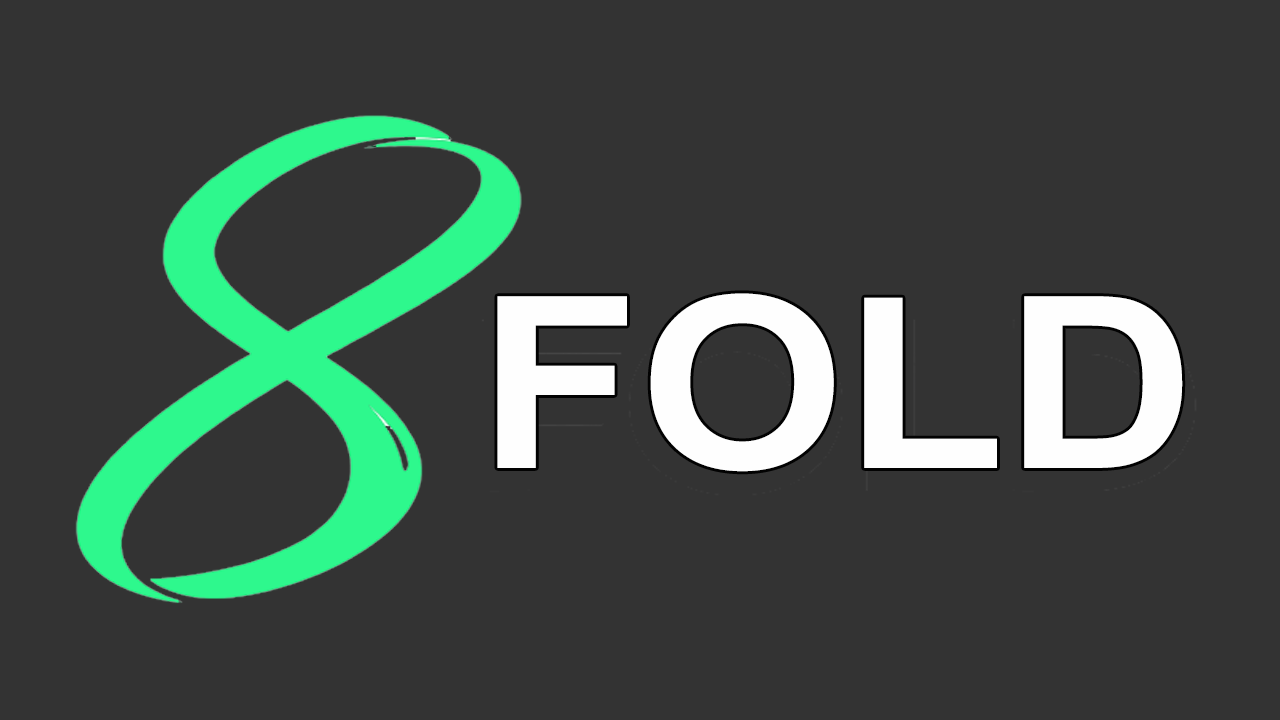
<style>
.page{position:relative;width:1280px;height:720px;background:#333333}
.page>*{position:absolute;margin:0}
.t1{font:239.6px "Arial-BoldMT";color:#fefefe;scale:1.1 1}
</style>
<div class="page">
<p class="t1" style="left:497px;top:293px;width:686px;height:179px">FOLD</p>
</div>
